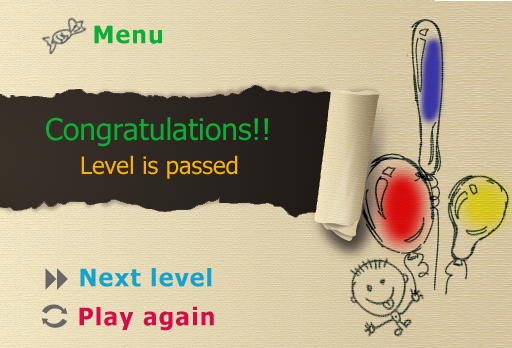
<style>
.page{position:relative;width:512px;height:348px}
.page>*{position:absolute;margin:0}
.t1{font:24px "Tahoma-Bold";letter-spacing:0.06em;color:#0baf35}
.t2{font:30px "Tahoma";color:#0baf35}
.t3{font:24px "Tahoma";color:#f7b108}
.t4{font:24px "Tahoma-Bold";letter-spacing:0.06em;color:#13a3cc}
.t5{font:24px "Tahoma-Bold";letter-spacing:0.06em;color:#d20d49}
</style>
<div class="page">
<p class="t1" style="left:94px;top:25px;width:68px;height:19px">Menu</p>
<p class="t2" style="left:46px;top:117px;width:222px;height:30px">Congratulations!!</p>
<p class="t3" style="left:81px;top:155px;width:157px;height:24px">Level is passed</p>
<p class="t4" style="left:80px;top:268px;width:132px;height:19px">Next level</p>
<p class="t5" style="left:79px;top:306px;width:135px;height:25px">Play again</p>
</div>
